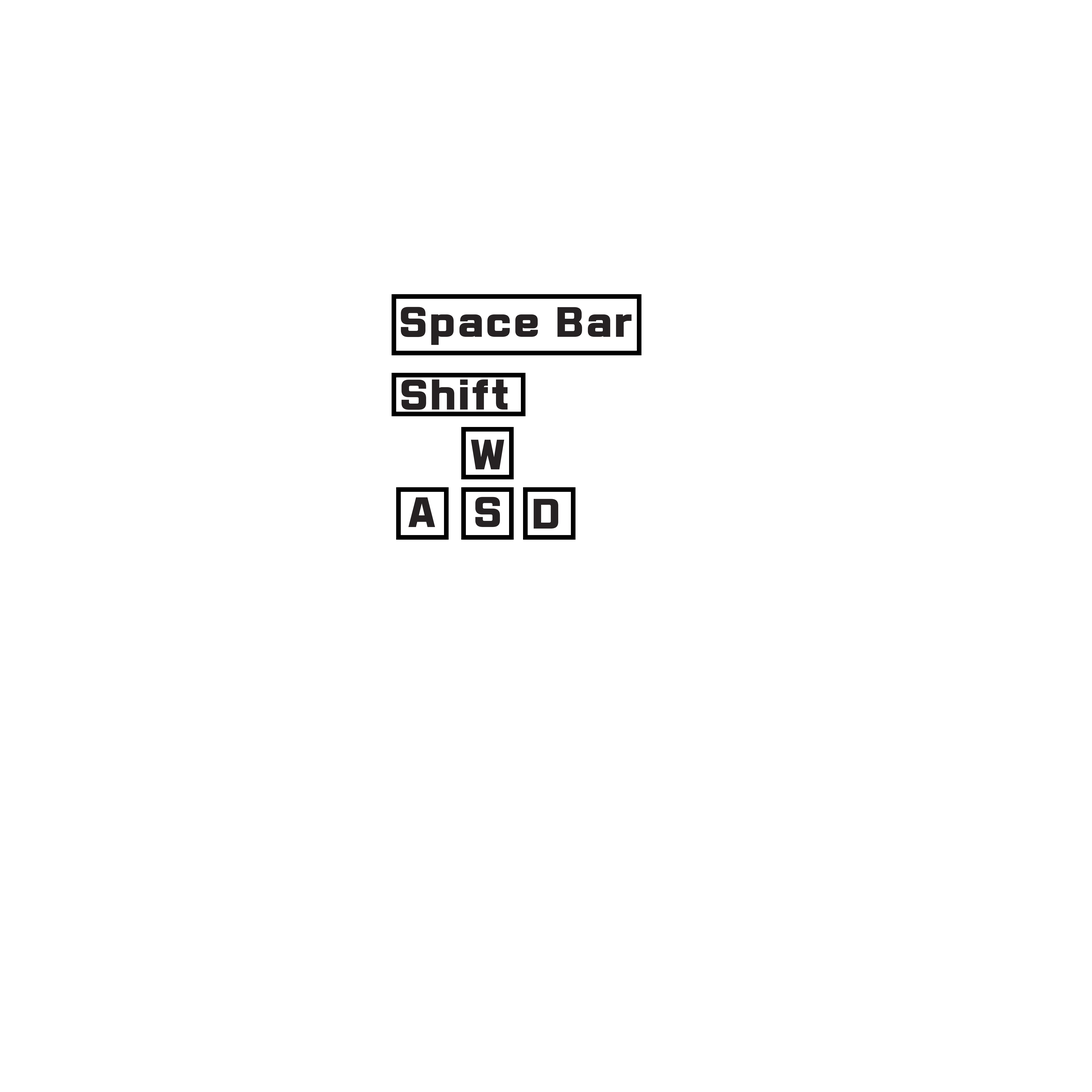
<style>
.page{position:relative;width:1092px;height:1092px;background:#ffffff}
.page>*{position:absolute;margin:0}
.t1{font:37px "Typo_SsangmunDong_B";letter-spacing:0.075em;color:#262223}
</style>
<div class="page">
<p class="t1" style="left:401px;top:307px;width:231px;height:38px">Space Bar</p>
<p class="t1" style="left:401px;top:379px;width:107px;height:31px">Shift</p>
<p class="t1" style="left:471px;top:440px;width:33px;height:30px">W</p>
<p class="t1" style="left:408px;top:497px;width:27px;height:30px">A</p>
<p class="t1" style="left:475px;top:497px;width:25px;height:30px">S</p>
<p class="t1" style="left:534px;top:499px;width:24px;height:30px">D</p>
</div>
